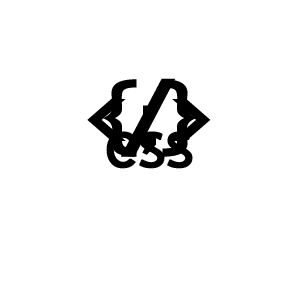
<style>
.page{position:relative;width:300px;height:300px;background:#ffffff}
.page>*{position:absolute;margin:0}
.t1{font:95.6px "Cabin-Regular";letter-spacing:-0.09em;color:#000000;font-weight:bold;scale:1.09 1}
.t2{font:84.4px "Cabin-Regular";color:#000000;font-weight:bold;scale:1.24 1}
.t3{font:48.8px "BlueHighway-Regular";letter-spacing:-0.025em;color:#000000;font-weight:bold;scale:1.08 1}
</style>
<div class="page">
<p class="t1" style="left:87px;top:78px;width:124px;height:79px">&lt;/&gt;</p>
<p class="t2" style="left:103px;top:79px;width:93px;height:78px">{;}</p>
<p class="t3" style="left:106px;top:131px;width:87px;height:38px">CSS</p>
</div>
